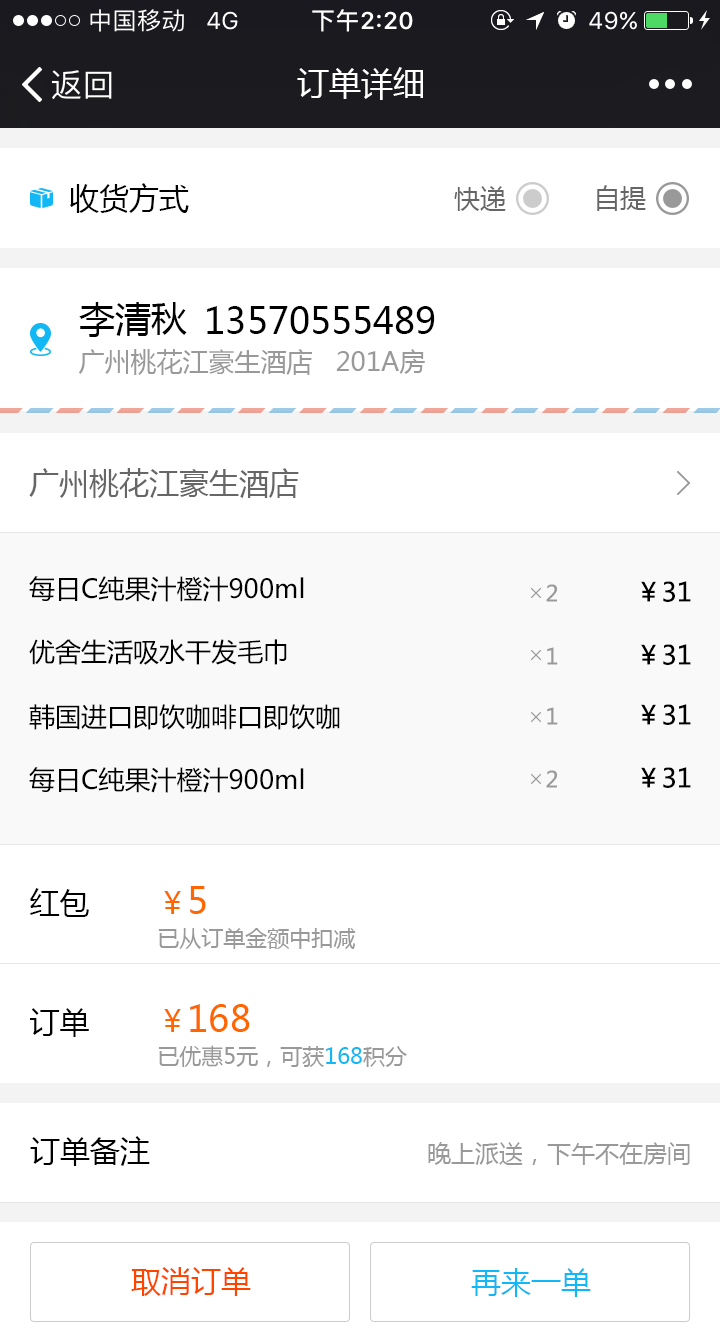
<style>
.page{position:relative;width:720px;height:1342px;background:#ffffff}
.page>*{position:absolute;margin:0}
.t1{font:32px "MicrosoftYaHei";color:#ffffff}
.t2{font:30px "MicrosoftYaHei";color:#000000}
.t3{font:26px "MicrosoftYaHei";color:#666666}
.t4{font:36px "MicrosoftYaHei";color:#000000}
.t5{font:26px "MicrosoftYaHei";color:#999999}
.t6{font:30px "MicrosoftYaHei";color:#666666}
.t7{font:26px "MicrosoftYaHei";color:#000000}
.t8{font:22px "MicrosoftYaHei";color:#999999}
.t9{font:22px/44px "MicrosoftYaHei";color:#999999}
.t10{font:30px/44px "MicrosoftYaHei";color:#ff6600}
.t11{font:36px/44px "MicrosoftYaHei";color:#ff6600}
.t12{font:22px/44px "MicrosoftYaHei";color:#12b7f5}
.t13{font:24px "MicrosoftYaHei";color:#999999}
.t14{font:30px "MicrosoftYaHei";color:#ff4400}
.t15{font:30px "MicrosoftYaHei";color:#12b7f5}
</style>
<div class="page">
<p class="t1" style="left:297px;top:67px;width:126px;height:33px">订单详细</p>
<p class="t2" style="left:70px;top:183px;width:119px;height:30px">收货方式</p>
<p class="t3" style="left:597px;top:185px;width:49px;height:26px">自提</p>
<p class="t3" style="left:454px;top:186px;width:52px;height:25px">快递</p>
<p class="t4" style="left:79px;top:302px;width:108px;height:35px">李清秋</p>
<p class="t4" style="left:207px;top:306px;width:228px;height:28px">13570555489</p>
<p class="t5" style="left:78px;top:349px;width:347px;height:26px">广州桃花江豪生酒店   201A房</p>
<p class="t6" style="left:29px;top:468px;width:270px;height:30px">广州桃花江豪生酒店</p>
<p class="t7" style="left:29px;top:576px;width:275px;height:26px">每日C纯果汁橙汁900ml</p>
<p class="t7" style="left:641px;top:581px;width:50px;height:21px">￥31</p>
<p class="t8" style="left:546px;top:584px;width:11px;height:18px">2</p>
<p class="t7" style="left:29px;top:639px;width:258px;height:26px">优舍生活吸水干发毛巾</p>
<p class="t8" style="left:547px;top:647px;width:11px;height:18px">1</p>
<p class="t7" style="left:641px;top:644px;width:50px;height:21px">￥31</p>
<p class="t7" style="left:29px;top:704px;width:311px;height:26px">韩国进口即饮咖啡口即饮咖</p>
<p class="t8" style="left:547px;top:707px;width:11px;height:18px">1</p>
<p class="t7" style="left:641px;top:704px;width:50px;height:21px">￥31</p>
<p class="t7" style="left:29px;top:767px;width:275px;height:26px">每日C纯果汁橙汁900ml</p>
<p class="t8" style="left:546px;top:770px;width:11px;height:18px">2</p>
<p class="t7" style="left:641px;top:767px;width:50px;height:21px">￥31</p>
<p class="t2" style="left:30px;top:888px;width:59px;height:29px">红包</p>
<p class="t9" style="left:158px;top:886px;width:198px;height:63px"><span class="t10">￥</span><span class="t11">5<br></span>已从订单金额中扣减</p>
<p class="t2" style="left:30px;top:1008px;width:59px;height:29px">订单</p>
<p class="t9" style="left:158px;top:1004px;width:249px;height:63px"><span class="t10">￥</span><span class="t11">168<br></span>已优惠5元，可获<span class="t12">168</span>积分</p>
<p class="t2" style="left:30px;top:1136px;width:120px;height:30px">订单备注</p>
<p class="t13" style="left:428px;top:1142px;width:262px;height:23px">晚上派送，下午不在房间</p>
<p class="t14" style="left:131px;top:1267px;width:120px;height:29px">取消订单</p>
<p class="t15" style="left:471px;top:1268px;width:120px;height:29px">再来一单</p>
</div>
